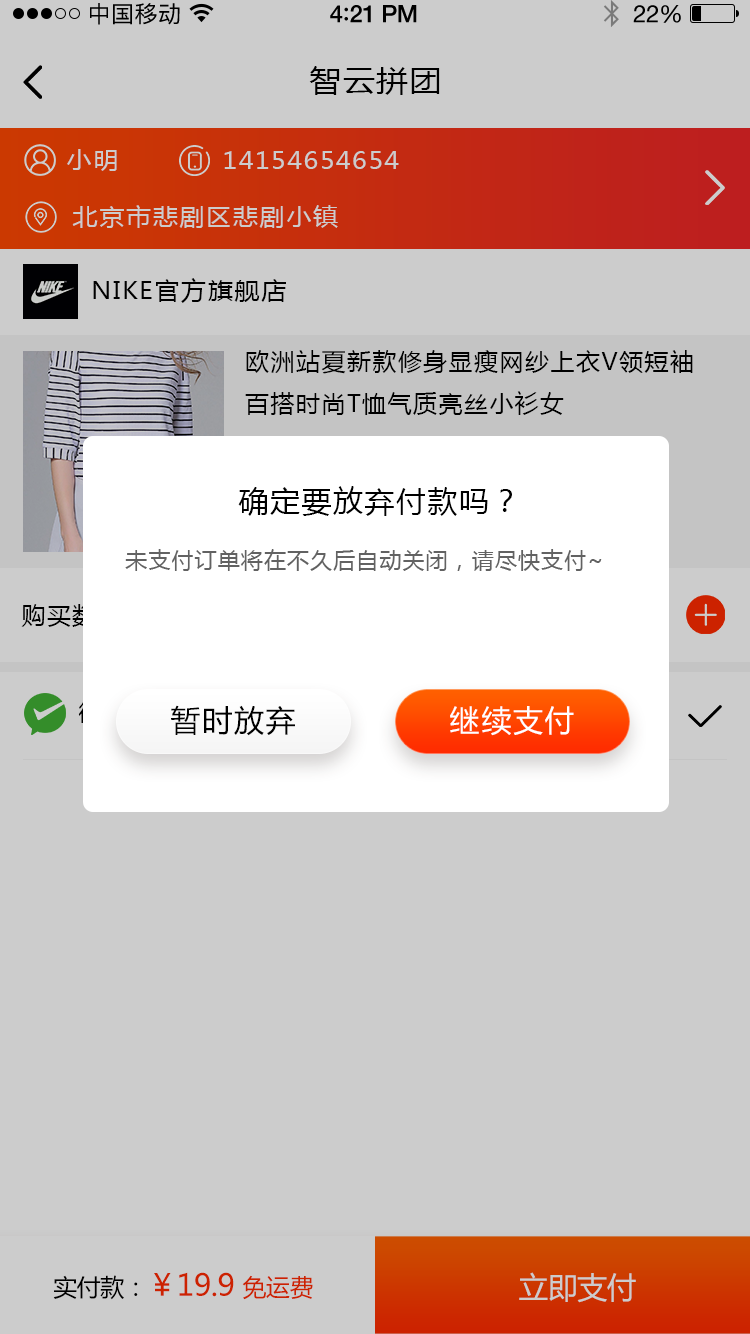
<style>
.page{position:relative;width:750px;height:1334px;background:#cccccc}
.page>*{position:absolute;margin:0}
.t1{font:23px "PingFangSC-Regular";letter-spacing:0.02em;color:#000000}
.t2{font:24px "HelveticaNeue-Medium";letter-spacing:-0.02em;color:#000000}
.t3{font:26px "Avenir-Medium";letter-spacing:-0.02em;color:#000000}
.t4{font:24px "HelveticaNeue";letter-spacing:-0.02em;color:#000000}
.t5{font:30px "MicrosoftYaHei";letter-spacing:0.05em;color:#000000;scale:1.06 1}
.t6{font:24px "MicrosoftYaHei";letter-spacing:0.05em;color:#cccccc;scale:1.06 1}
.t7{font:24px "MicrosoftYaHei";letter-spacing:0.05em;color:#000000;scale:1.06 1}
.t8{font:24px "MicrosoftYaHei";letter-spacing:0.06em;color:#000000;text-transform:uppercase}
.t9{font:30px "MicrosoftYaHei";letter-spacing:0.05em;color:#000000;text-transform:uppercase}
.t10{font:22px "MicrosoftYaHei";letter-spacing:0.05em;color:#626262;text-transform:uppercase}
.t11{font:30px "MicrosoftYaHei";letter-spacing:0.05em;color:#ffffff;text-transform:uppercase}
.t12{font:30px "MicrosoftYaHei";letter-spacing:-0.02em;color:#cc2200}
.t13{font:24px "MicrosoftYaHei";letter-spacing:-0.02em;color:#cc2200}
.t14{font:30px "MicrosoftYaHei";letter-spacing:-0.02em;color:#cccccc}
</style>
<div class="page">
<p class="t1" style="left:90px;top:3px;width:90px;height:22px">中国移动</p>
<p class="t2" style="left:330px;top:5px;width:87px;height:18px">4<span class="t3">:</span>21 PM</p>
<p class="t4" style="left:633px;top:5px;width:48px;height:18px">22%</p>
<p class="t5" style="left:309px;top:66px;width:131px;height:29px">智云拼团</p>
<p class="t6" style="left:67px;top:149px;width:50px;height:22px">小明</p>
<p class="t6" style="left:224px;top:151px;width:175px;height:18px">14154654654</p>
<p class="t6" style="left:72px;top:205px;width:266px;height:23px">北京市悲剧区悲剧小镇</p>
<p class="t7" style="left:93px;top:278px;width:193px;height:25px">NIKE官方旗舰店</p>
<p class="t8" style="left:245px;top:350px;width:448px;height:65px">欧洲站夏新款修身显瘦网纱上衣v领短袖百搭时尚t恤气质亮丝小衫女</p>
<p class="t9" style="left:238px;top:486px;width:274px;height:30px">确定要放弃付款吗？</p>
<p class="t10" style="left:125px;top:549px;width:477px;height:22px">未支付订单将在不久后自动关闭，请尽快支付~</p>
<p class="t8" style="left:21px;top:604px;width:100px;height:23px">购买数量</p>
<p class="t9" style="left:171px;top:705px;width:124px;height:31px">暂时放弃</p>
<p class="t11" style="left:450px;top:706px;width:124px;height:30px">继续支付</p>
<p class="t12" style="left:53px;top:1272px;width:260px;height:28px"><span class="t13">实付款：</span>￥19.9 <span class="t13">免运费</span></p>
<p class="t14" style="left:519px;top:1272px;width:117px;height:31px">立即支付</p>
</div>
